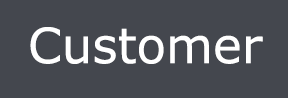
<style>
.page{position:relative;width:288px;height:98px;background:#44474e}
.page>*{position:absolute;margin:0}
.t1{font:48.9px "Verdana";color:#ffffff}
</style>
<div class="page">
<p class="t1" style="left:30px;top:27px;width:233px;height:37px">Customer</p>
</div>
